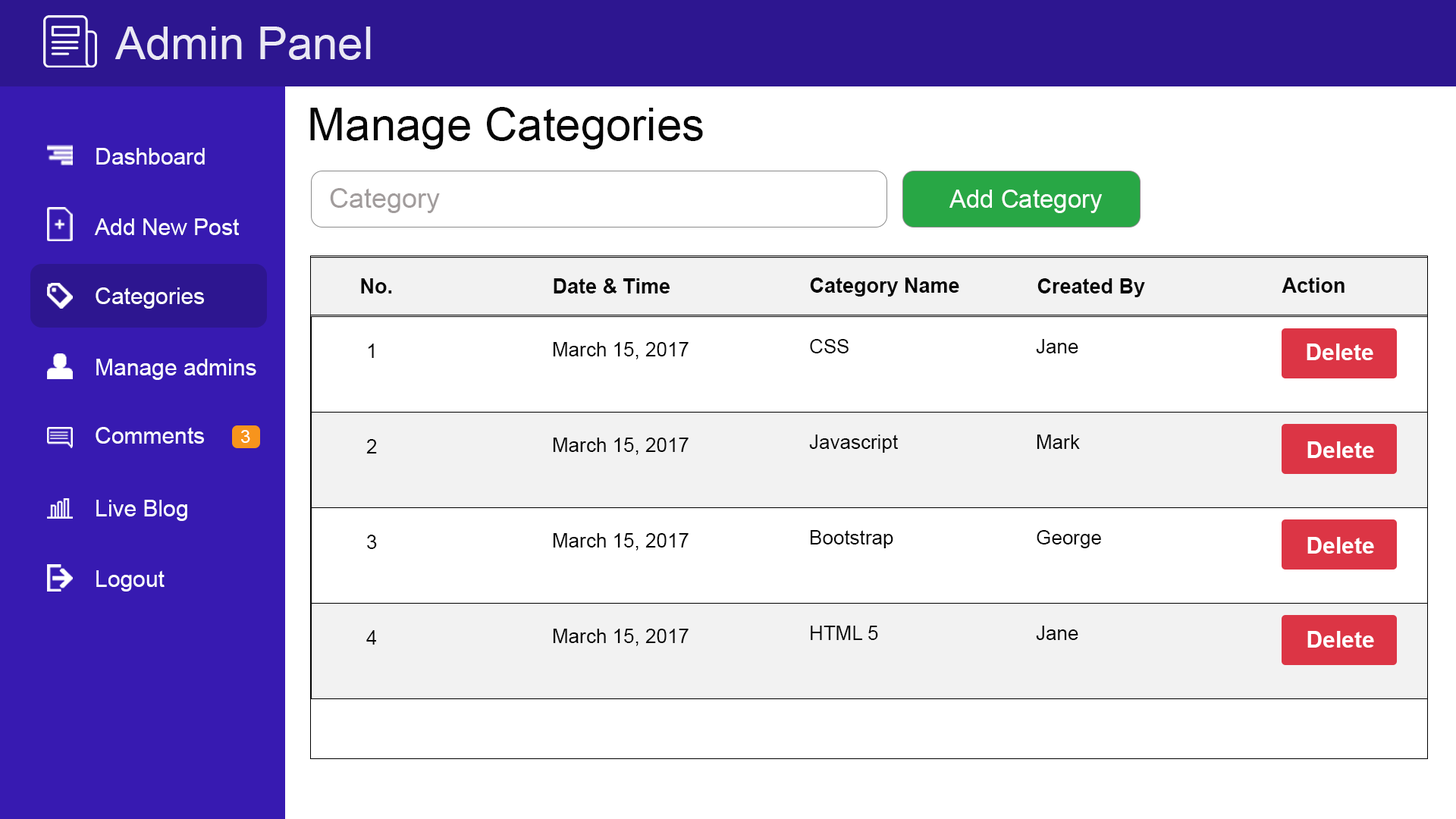
<style>
.page{position:relative;width:1456px;height:819px;background:#ffffff}
.page>*{position:absolute;margin:0}
.t1{font:45.5px "ArialMT";color:#eae8f4}
.t2{font:45.5px "ArialMT";color:#060606}
.t3{font:22.7px "ArialMT";color:#ffffff}
.t4{font:27.3px "ArialMT";color:#a19c9c}
.t5{font:25px "ArialMT";color:#fefefe}
.t6{font:20.5px "Arial-BoldMT";color:#060606}
.t7{font:19.7px "ArialMT";color:#060606}
.t8{font:22.7px "Arial-BoldMT";color:#ffffff}
.t9{font:18.2px "ArialMT";color:#ffffff}
</style>
<div class="page">
<p class="t1" style="left:115px;top:27px;width:256px;height:33px">Admin Panel</p>
<p class="t2" style="left:310px;top:107px;width:393px;height:42px">Manage Categories</p>
<p class="t3" style="left:96px;top:148px;width:109px;height:17px">Dashboard</p>
<p class="t4" style="left:330px;top:188px;width:110px;height:25px">Category</p>
<p class="t5" style="left:949px;top:190px;width:153px;height:23px">Add Category</p>
<p class="t3" style="left:94px;top:218px;width:145px;height:17px">Add New Post</p>
<p class="t6" style="left:361px;top:278px;width:31px;height:15px">No.</p>
<p class="t6" style="left:554px;top:278px;width:116px;height:15px">Date &amp; Time</p>
<p class="t6" style="left:810px;top:278px;width:149px;height:19px">Category Name</p>
<p class="t6" style="left:1037px;top:278px;width:108px;height:19px">Created By</p>
<p class="t6" style="left:1282px;top:278px;width:63px;height:15px">Action</p>
<p class="t3" style="left:96px;top:287px;width:108px;height:22px">Categories</p>
<p class="t7" style="left:810px;top:339px;width:39px;height:14px">CSS</p>
<p class="t7" style="left:1036px;top:339px;width:42px;height:14px">Jane Doe</p>
<p class="t7" style="left:368px;top:344px;width:6px;height:14px">1</p>
<p class="t7" style="left:553px;top:342px;width:136px;height:17px">March 15, 2017</p>
<p class="t8" style="left:1307px;top:344px;width:66px;height:16px">Delete</p>
<p class="t3" style="left:96px;top:359px;width:160px;height:21px">Manage admins</p>
<p class="t3" style="left:96px;top:427px;width:108px;height:17px">Comments</p>
<p class="t9" style="left:241px;top:430px;width:9px;height:13px">3</p>
<p class="t7" style="left:553px;top:438px;width:136px;height:17px">March 15, 2017</p>
<p class="t7" style="left:809px;top:435px;width:89px;height:18px">Javascript</p>
<p class="t7" style="left:1037px;top:435px;width:43px;height:14px">Mark</p>
<p class="t7" style="left:366px;top:439px;width:11px;height:14px">2</p>
<p class="t8" style="left:1307px;top:441px;width:67px;height:17px">Delete</p>
<p class="t3" style="left:96px;top:500px;width:91px;height:21px">Live Blog</p>
<p class="t7" style="left:553px;top:533px;width:136px;height:18px">March 15, 2017</p>
<p class="t7" style="left:811px;top:530px;width:82px;height:18px">Bootstrap</p>
<p class="t7" style="left:1037px;top:530px;width:64px;height:18px">George</p>
<p class="t7" style="left:367px;top:535px;width:10px;height:14px">3</p>
<p class="t8" style="left:1307px;top:537px;width:67px;height:17px">Delete</p>
<p class="t3" style="left:96px;top:570px;width:69px;height:21px">Logout</p>
<p class="t7" style="left:553px;top:629px;width:136px;height:17px">March 15, 2017</p>
<p class="t7" style="left:811px;top:626px;width:67px;height:14px">HTML 5</p>
<p class="t7" style="left:1036px;top:626px;width:42px;height:14px">Jane Doe</p>
<p class="t7" style="left:366px;top:630px;width:10px;height:15px">4</p>
<p class="t8" style="left:1307px;top:631px;width:67px;height:17px">Delete</p>
</div>
